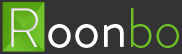
<style>
.page{position:relative;width:182px;height:54px;background:#333333}
.page>*{position:absolute;margin:0}
.t1{font:55.7px "BrandonGrotesque-Light"}
.t2{font:55.7px "BrandonGrotesque-Regular";color:#ffffff}
.t3{font:55.7px "BrandonGrotesque-Light";color:#6ebf28}
</style>
<div class="page">
<p class="t1" style="left:11px;top:8px;width:27px;height:39px">R</p>
<p class="t2" style="left:48px;top:8px;width:131px;height:40px">oon<span class="t3">bo</span></p>
</div>
